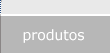
<style>
.page{position:relative;width:110px;height:53px;background:#b7b7b7}
.page>*{position:absolute;margin:0}
.t1{font:14px "Verdana";color:#ffffff}
</style>
<div class="page">
<p class="t1" style="left:23px;top:29px;width:61px;height:14px">produtos</p>
</div>
